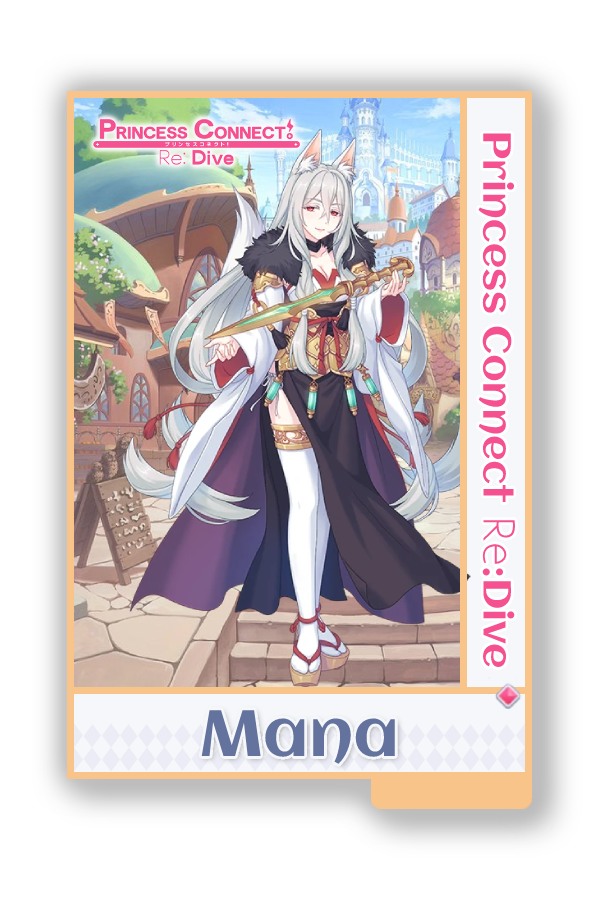
<style>
.page{position:relative;width:600px;height:900px;background:#ffffff}
.page>*{position:absolute;margin:0}
.t1{font:39px "Aclonica-Regular";color:#f55191}
.t2{font:39px "AaarghNormal";color:#f55191}
.t3{font:65px "Aclonica-Regular";color:#64739d}
</style>
<div class="page">
<p class="t1" style="left:478px;top:133px;width:38px;height:534px;rotate:90deg">Princess Connect <span class="t2">Re</span>:Dive</p>
<p class="t3" style="left:201px;top:710px;width:194px;height:54px">Mana</p>
</div>
